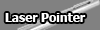
<style>
.page{position:relative;width:100px;height:30px;background:#818181}
.page>*{position:absolute;margin:0}
.t1{font:12px "Tahoma-Bold";color:#ffffff}
</style>
<div class="page">
<p class="t1" style="left:5px;top:13px;width:81px;height:9px">Laser Pointer</p>
</div>
